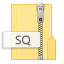
<style>
.page{position:relative;width:64px;height:64px;background:#ffffff}
.page>*{position:absolute;margin:0}
.t1{font:12px "SegoeUI";color:#64625e}
</style>
<div class="page">
<p class="t1" style="left:15px;top:35px;width:16px;height:11px">SQ</p>
</div>
